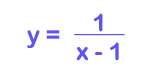
<style>
.page{position:relative;width:160px;height:75px;background:#ffffff}
.page>*{position:absolute;margin:0}
.t1{font:24px "ArialRoundedMTBold";color:#5f54f1}
.t2{font:24px "ArialRoundedMTBold";color:#5f54f1;text-decoration:underline}
</style>
<div class="page">
<p class="t1" style="left:74px;top:13px;width:51px;height:48px;text-align:center"><span class="t2">   1   <br></span>x - 1</p>
<p class="t1" style="left:27px;top:30px;width:33px;height:19px">y =</p>
</div>
